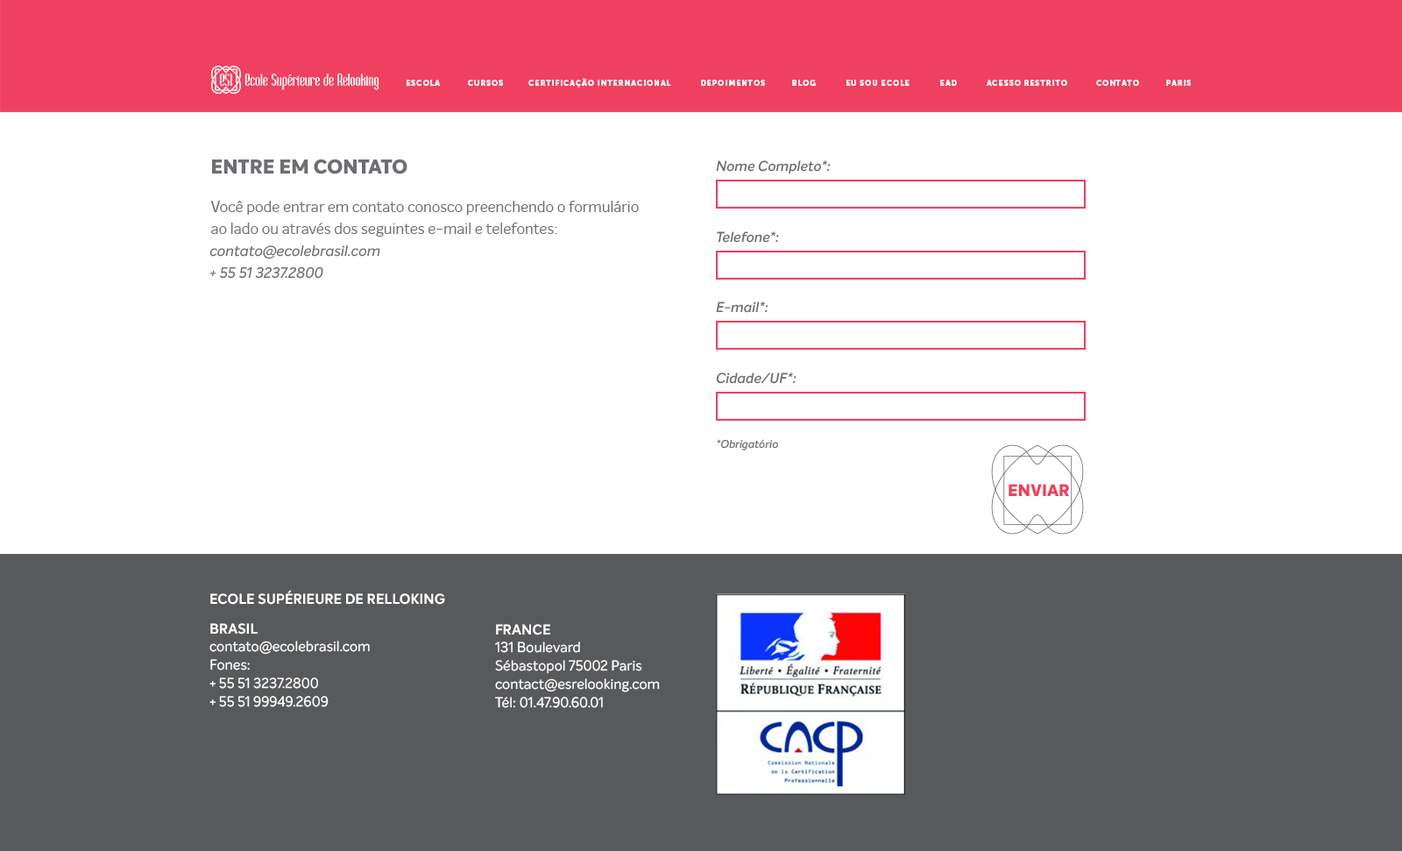
<style>
.page{position:relative;width:1402px;height:851px;background:#ffffff}
.page>*{position:absolute;margin:0}
.t1{font:7.9px "MuseoSans-900";letter-spacing:0.1em;color:#ffffff;text-transform:uppercase}
.t2{font:19.4px "InteloAlt-ExtraBold";color:#6d6e71;text-transform:uppercase}
.t3{font:14.1px "InteloAlt-SemiBoldItalic";color:#6d6e71}
.t4{font:14.6px/21.9px "InteloAlt-Regular";color:#6d6e71}
.t5{font:14.6px/21.9px "InteloAlt-MediumItalic";color:#6d6e71}
.t6{font:11px "InteloAlt-SemiBoldItalic";color:#6d6e71}
.t7{font:16.4px "InteloAlt-ExtraBold";color:#ef4060;text-transform:uppercase}
.t8{font:14.1px "InteloAlt-Bold";color:#ffffff;text-transform:uppercase}
.t9{font:14.1px/18.3px "Intelo-Regular";color:#ffffff}
</style>
<div class="page">
<p class="t1" style="left:528px;top:78px;width:143px;height:10px">CERTIFICAÇÃO internacional</p>
<p class="t1" style="left:407px;top:80px;width:33px;height:6px">escola</p>
<p class="t1" style="left:468px;top:80px;width:35px;height:6px">cursos</p>
<p class="t1" style="left:701px;top:80px;width:64px;height:6px">depoimentos</p>
<p class="t1" style="left:792px;top:80px;width:24px;height:6px">blog</p>
<p class="t1" style="left:846px;top:80px;width:63px;height:6px">eu sou ecole</p>
<p class="t1" style="left:940px;top:80px;width:17px;height:6px">ead</p>
<p class="t1" style="left:986px;top:80px;width:81px;height:6px">ACESSO RESTRITO</p>
<p class="t1" style="left:1096px;top:80px;width:43px;height:6px">contato</p>
<p class="t1" style="left:1166px;top:80px;width:25px;height:6px">paris</p>
<p class="t2" style="left:212px;top:159px;width:195px;height:15px">entre em contato</p>
<p class="t3" style="left:716px;top:160px;width:115px;height:14px">Nome Completo*:</p>
<p class="t4" style="left:209px;top:201px;width:430px;height:78px">Você pode entrar em contato conosco preenchendo o formulário <br>ao lado ou através dos seguintes e-mail e telefontes:<br><span class="t5">contato@ecolebrasil.com<br>+ 55 51 3237.2800</span></p>
<p class="t3" style="left:717px;top:231px;width:62px;height:12px">Telefone*:</p>
<p class="t3" style="left:716px;top:301px;width:52px;height:12px">E-mail*:</p>
<p class="t3" style="left:716px;top:372px;width:80px;height:12px">Cidade/UF*:</p>
<p class="t6" style="left:717px;top:439px;width:61px;height:11px">*Obrigatório</p>
<p class="t7" style="left:1008px;top:484px;width:61px;height:12px">enviar</p>
<p class="t8" style="left:210px;top:590px;width:235px;height:15px">Ecole Supérieure de Relloking</p>
<p class="t8" style="left:210px;top:623px;width:48px;height:11px">BRASIL</p>
<p class="t8" style="left:496px;top:624px;width:54px;height:11px">france</p>
<p class="t9" style="left:209px;top:640px;width:161px;height:67px">contato@ecolebrasil.com<br>Fones: <br>+ 55 51 3237.2800 <br>+ 55 51 99949.2609</p>
<p class="t9" style="left:495px;top:641px;width:165px;height:67px">131 Boulevard <br>Sébastopol 75002 Paris<br>contact@esrelooking.com<br>Tél: 01.47.90.60.01</p>
</div>
